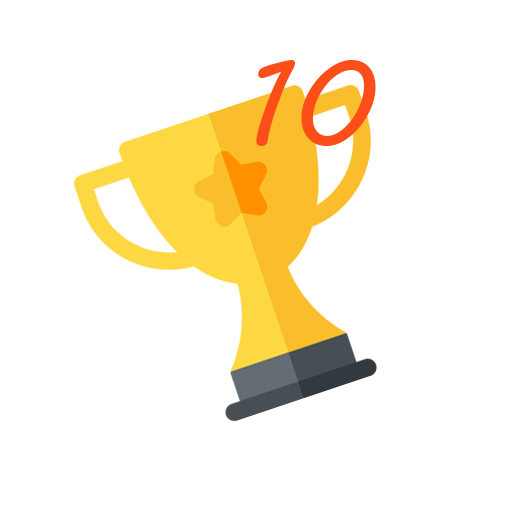
<style>
.page{position:relative;width:512px;height:512px;background:#ffffff}
.page>*{position:absolute;margin:0}
.t1{font:120px "MVBoli";color:#fb4e19}
</style>
<div class="page">
<p class="t1" style="left:256px;top:60px;width:120px;height:86px">10</p>
</div>
